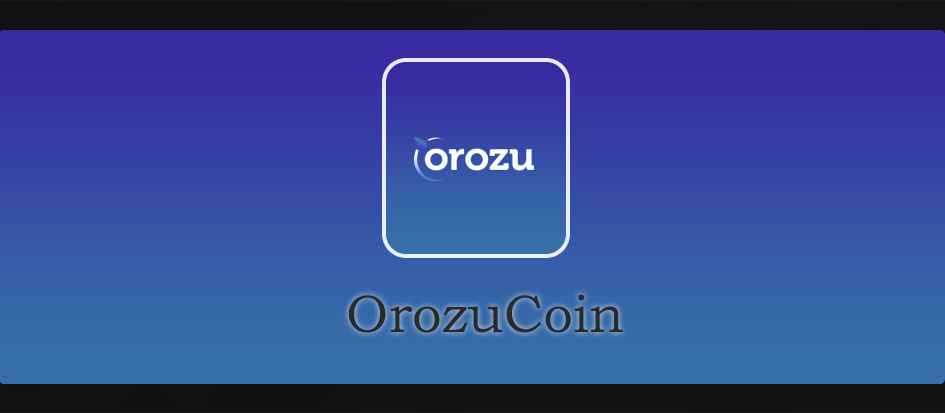
<style>
.page{position:relative;width:945px;height:413px}
.page>*{position:absolute;margin:0}
.t1{font:53.3px "BookmanOldStyle";color:#383838}
</style>
<div class="page">
<p class="t1" style="left:348px;top:294px;width:275px;height:39px">OrozuCoin</p>
</div>
